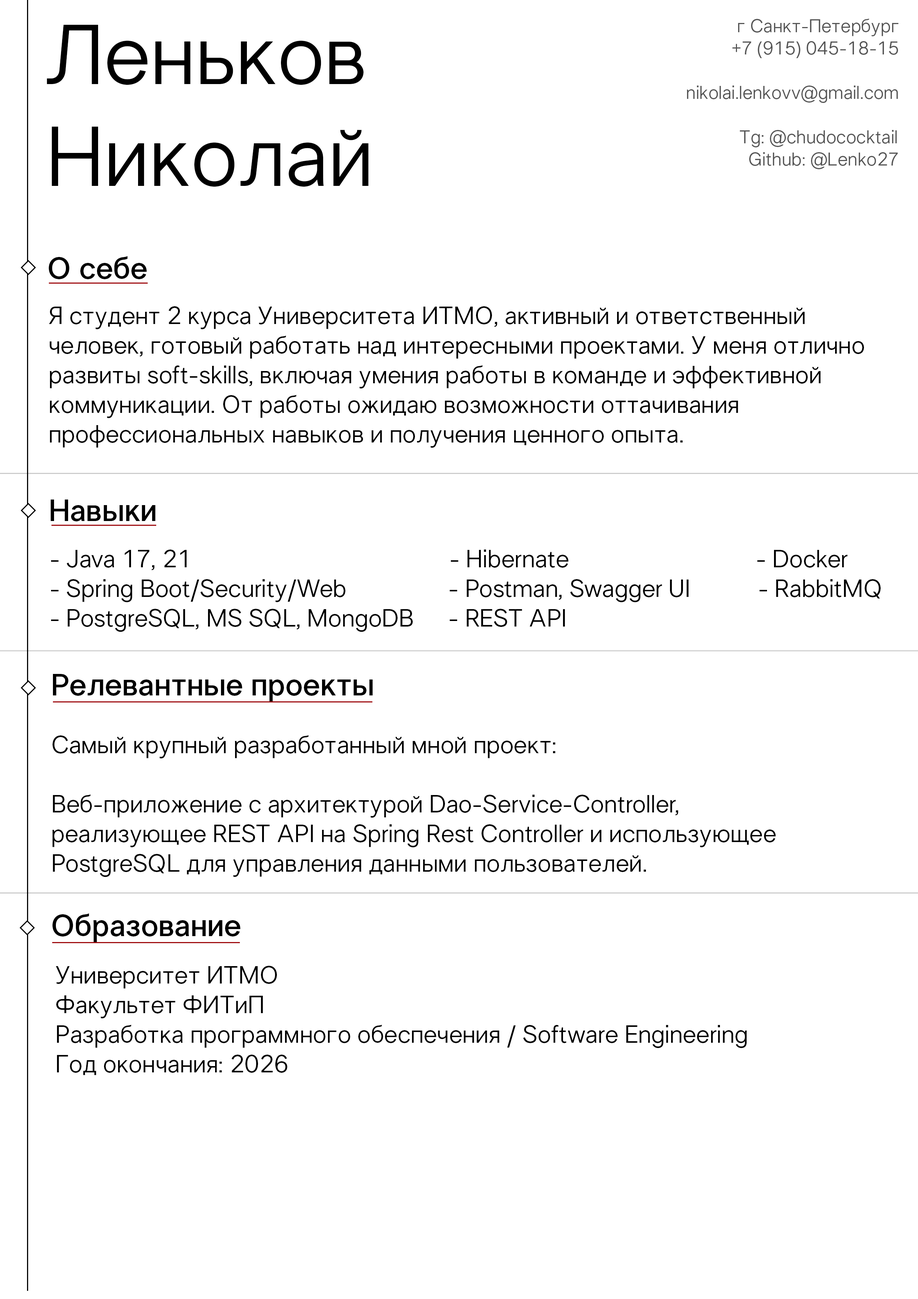
<style>
.page{position:relative;width:918px;height:1299px;background:#ffffff}
.page>*{position:absolute;margin:0}
.t1{font:84.8px "LTSuperior-Regular";color:#000000}
.t2{font:18.5px "LTSuperior-Regular";color:#555555}
.t3{font:30.9px "LTSuperior-Semibold";color:#000000}
.t4{font:24.7px "LTSuperior-Regular";color:#000000}
</style>
<div class="page">
<p class="t1" style="left:47px;top:24px;width:322px;height:163px">Леньков <br>Николай</p>
<p class="t2" style="left:687px;top:19px;width:212px;height:150px;text-align:right">г Санкт-Петербург<br>+7 (915) 045-18-15<br><br>nikolai.lenkovv@gmail.com<br><br>Tg: @chudococktail <br>Github: @Lenko27</p>
<p class="t3" style="left:48px;top:256px;width:99px;height:23px">О себе</p>
<p class="t4" style="left:49px;top:306px;width:815px;height:142px">Я студент 2 курса Университета ИТМО, активный и ответственный <br>человек, готовый работать над интересными проектами. У меня отлично <br>развиты soft-skills, включая умения работы в команде и эффективной <br>коммуникации. От работы ожидаю возможности оттачивания <br>профессиональных навыков и получения ценного опыта.</p>
<p class="t3" style="left:51px;top:499px;width:104px;height:22px">Навыки</p>
<p class="t4" style="left:51px;top:549px;width:830px;height:83px">- Java 17, 21                    - Hibernate               - Docker<br>- Spring Boot/Security/Web         - Postman, Swagger UI           - RabbitMQ<br>- PostgreSQL, MS SQL, MongoDB    - REST API</p>
<p class="t3" style="left:53px;top:674px;width:320px;height:28px">Релевантные проекты</p>
<p class="t4" style="left:52px;top:735px;width:724px;height:142px">Самый крупный разработанный мной проект:<br><br>Веб-приложение с архитектурой Dao-Service-Controller, <br>реализующее REST API на Spring Rest Controller и использующее <br>PostgreSQL для управления данными пользователей.</p>
<p class="t3" style="left:52px;top:913px;width:189px;height:29px">Образование</p>
<p class="t4" style="left:56px;top:966px;width:691px;height:109px">Университет ИТМО<br>Факультет ФИТиП<br>Разработка программного обеспечения / Software Engineering<br>Год окончания: 2026</p>
</div>
